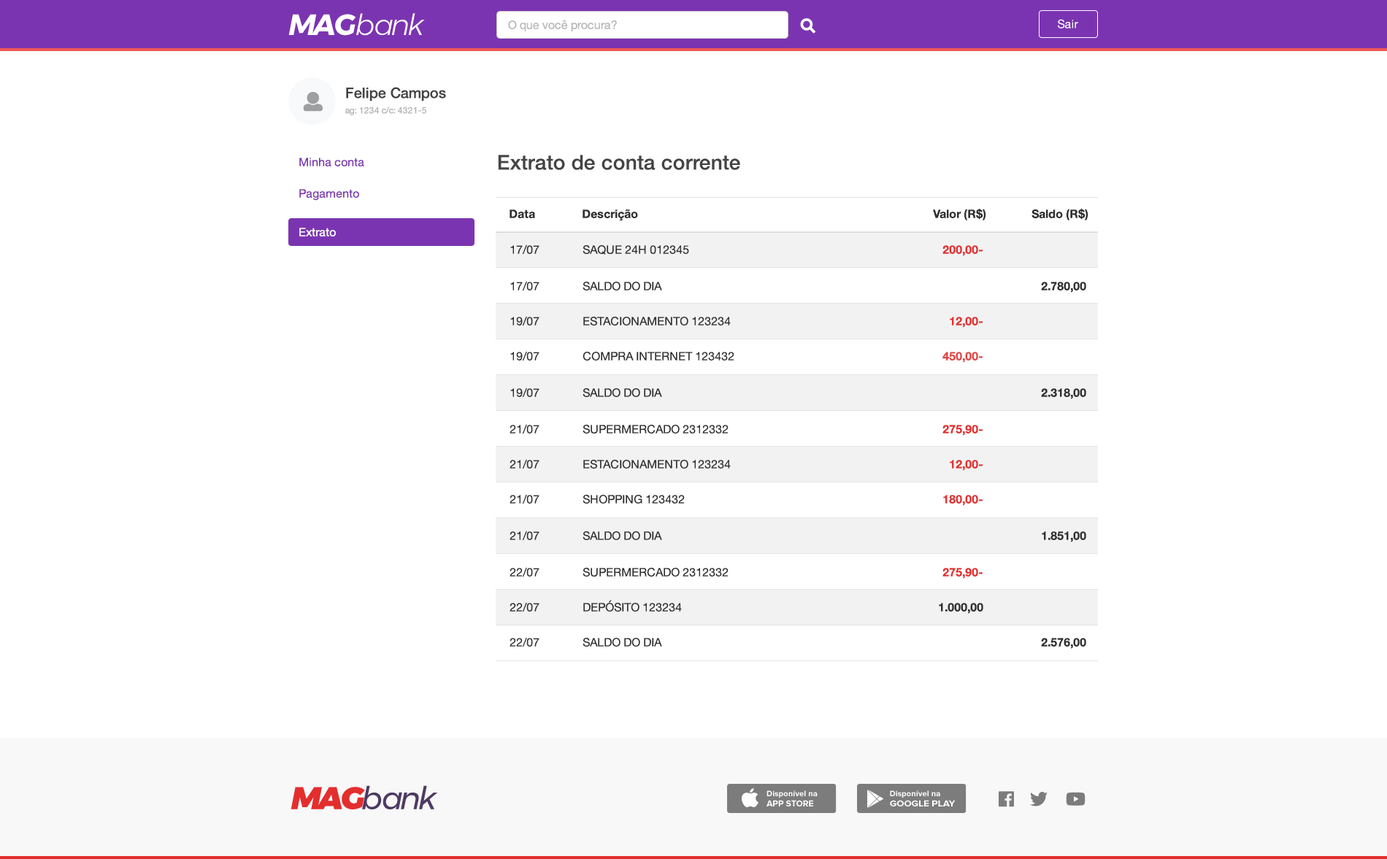
<style>
.page{position:relative;width:1387px;height:859px;background:#ffffff}
.page>*{position:absolute;margin:0}
.t1{font:29.2px "Montserrat-LightItalic";letter-spacing:-0.075em;color:#ffffff}
.t2{font:29.2px "Montserrat-BoldItalic";letter-spacing:-0.075em;color:#ffffff}
.t3{font:11.7px "HelveticaNeue";color:#b6b6b6}
.t4{font:11.7px "HelveticaNeue";color:#ffffff}
.t5{font:14.6px "HelveticaNeue-Medium";color:#444444}
.t6{font:8.8px "HelveticaNeue";color:#b1b1b1}
.t7{font:11.7px "HelveticaNeue";color:#7b34b1}
.t8{font:20.4px "HelveticaNeue-Medium";color:#444444}
.t9{font:11.7px "HelveticaNeue-Bold";color:#2f2f2f}
.t10{font:11.7px "HelveticaNeue";color:#2f2f2f}
.t11{font:11.7px "HelveticaNeue-Bold";color:#e13131}
.t12{font:11.7px "HelveticaNeue-Bold";color:#e34545}
.t13{font:31.7px "Montserrat-Italic";letter-spacing:-0.075em;color:#4e3a63}
.t14{font:31.7px "Montserrat-BlackItalic";letter-spacing:-0.075em;color:#e32e2e}
</style>
<div class="page">
<p class="t1" style="left:288px;top:13px;width:137px;height:23px"><span class="t2">MAG</span>bank</p>
<p class="t3" style="left:508px;top:20px;width:109px;height:11px">O que você procura?</p>
<p class="t4" style="left:1058px;top:19px;width:21px;height:9px">Sair</p>
<p class="t5" style="left:346px;top:87px;width:100px;height:15px">Felipe Campos</p>
<p class="t6" style="left:345px;top:107px;width:81px;height:8px">ag: 1234 c/c: 4321-5</p>
<p class="t7" style="left:299px;top:158px;width:65px;height:8px">Minha conta</p>
<p class="t8" style="left:498px;top:155px;width:242px;height:15px">Extrato de conta corrente</p>
<p class="t7" style="left:299px;top:189px;width:60px;height:12px">Pagamento</p>
<p class="t9" style="left:510px;top:210px;width:25px;height:8px">Data</p>
<p class="t9" style="left:583px;top:210px;width:55px;height:11px">Descrição</p>
<p class="t9" style="left:933px;top:208px;width:54px;height:13px">Valor (R$)</p>
<p class="t9" style="left:1032px;top:208px;width:57px;height:13px">Saldo (R$)</p>
<p class="t4" style="left:299px;top:228px;width:37px;height:9px">Extrato</p>
<p class="t10" style="left:510px;top:245px;width:30px;height:9px">17/07</p>
<p class="t10" style="left:583px;top:245px;width:106px;height:10px">SAQUE 24H 012345</p>
<p class="t11" style="left:943px;top:245px;width:40px;height:11px">200,00-</p>
<p class="t10" style="left:510px;top:281px;width:30px;height:10px">17/07</p>
<p class="t10" style="left:583px;top:281px;width:79px;height:10px">SALDO DO DIA</p>
<p class="t9" style="left:1041px;top:282px;width:46px;height:11px">2.780,00</p>
<p class="t10" style="left:510px;top:316px;width:30px;height:10px">19/07</p>
<p class="t10" style="left:583px;top:316px;width:148px;height:10px">ESTACIONAMENTO 123234</p>
<p class="t11" style="left:950px;top:317px;width:33px;height:11px">12,00-</p>
<p class="t10" style="left:510px;top:351px;width:30px;height:10px">19/07</p>
<p class="t10" style="left:583px;top:351px;width:152px;height:10px">COMPRA INTERNET 123432</p>
<p class="t12" style="left:943px;top:352px;width:40px;height:11px">450,00-</p>
<p class="t10" style="left:510px;top:388px;width:30px;height:9px">19/07</p>
<p class="t10" style="left:583px;top:388px;width:79px;height:9px">SALDO DO DIA</p>
<p class="t9" style="left:1041px;top:388px;width:46px;height:11px">2.318,00</p>
<p class="t10" style="left:510px;top:424px;width:30px;height:10px">21/07</p>
<p class="t10" style="left:583px;top:424px;width:146px;height:10px">SUPERMERCADO 2312332</p>
<p class="t11" style="left:943px;top:425px;width:40px;height:11px">275,90-</p>
<p class="t10" style="left:510px;top:459px;width:30px;height:10px">21/07</p>
<p class="t10" style="left:583px;top:459px;width:148px;height:10px">ESTACIONAMENTO 123234</p>
<p class="t11" style="left:950px;top:460px;width:33px;height:11px">12,00-</p>
<p class="t10" style="left:510px;top:494px;width:30px;height:10px">21/07</p>
<p class="t10" style="left:583px;top:494px;width:102px;height:10px">SHOPPING 123432</p>
<p class="t11" style="left:943px;top:495px;width:40px;height:11px">180,00-</p>
<p class="t10" style="left:510px;top:531px;width:30px;height:9px">21/07</p>
<p class="t10" style="left:583px;top:531px;width:79px;height:9px">SALDO DO DIA</p>
<p class="t9" style="left:1042px;top:532px;width:45px;height:11px">1.851,00</p>
<p class="t10" style="left:510px;top:567px;width:30px;height:10px">22/07</p>
<p class="t10" style="left:583px;top:567px;width:146px;height:10px">SUPERMERCADO 2312332</p>
<p class="t11" style="left:943px;top:568px;width:40px;height:11px">275,90-</p>
<p class="t10" style="left:510px;top:602px;width:30px;height:10px">22/07</p>
<p class="t10" style="left:583px;top:600px;width:99px;height:12px">DEPÓSITO 123234</p>
<p class="t9" style="left:939px;top:603px;width:45px;height:11px">1.000,00</p>
<p class="t10" style="left:510px;top:637px;width:30px;height:10px">22/07</p>
<p class="t10" style="left:583px;top:637px;width:79px;height:10px">SALDO DO DIA</p>
<p class="t9" style="left:1041px;top:638px;width:46px;height:11px">2.576,00</p>
<p class="t13" style="left:291px;top:786px;width:147px;height:24px"><span class="t14">MAG</span>bank</p>
</div>
